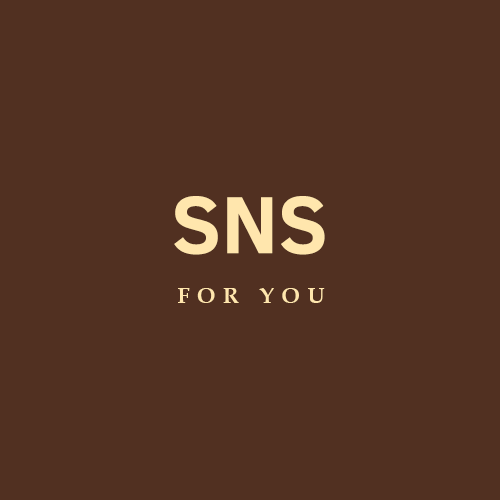
<style>
.page{position:relative;width:500px;height:500px;background:#513021}
.page>*{position:absolute;margin:0}
.t1{font:82.8px "ClearSans-Bold";color:#ffe6ad}
.t2{font:21.8px "BookAntiqua-Bold";letter-spacing:0.35em;color:#ffe6ad}
</style>
<div class="page">
<p class="t1" style="left:174px;top:196px;width:151px;height:59px">SNS</p>
<p class="t2" style="left:178px;top:288px;width:147px;height:15px">FOR YOU</p>
</div>
